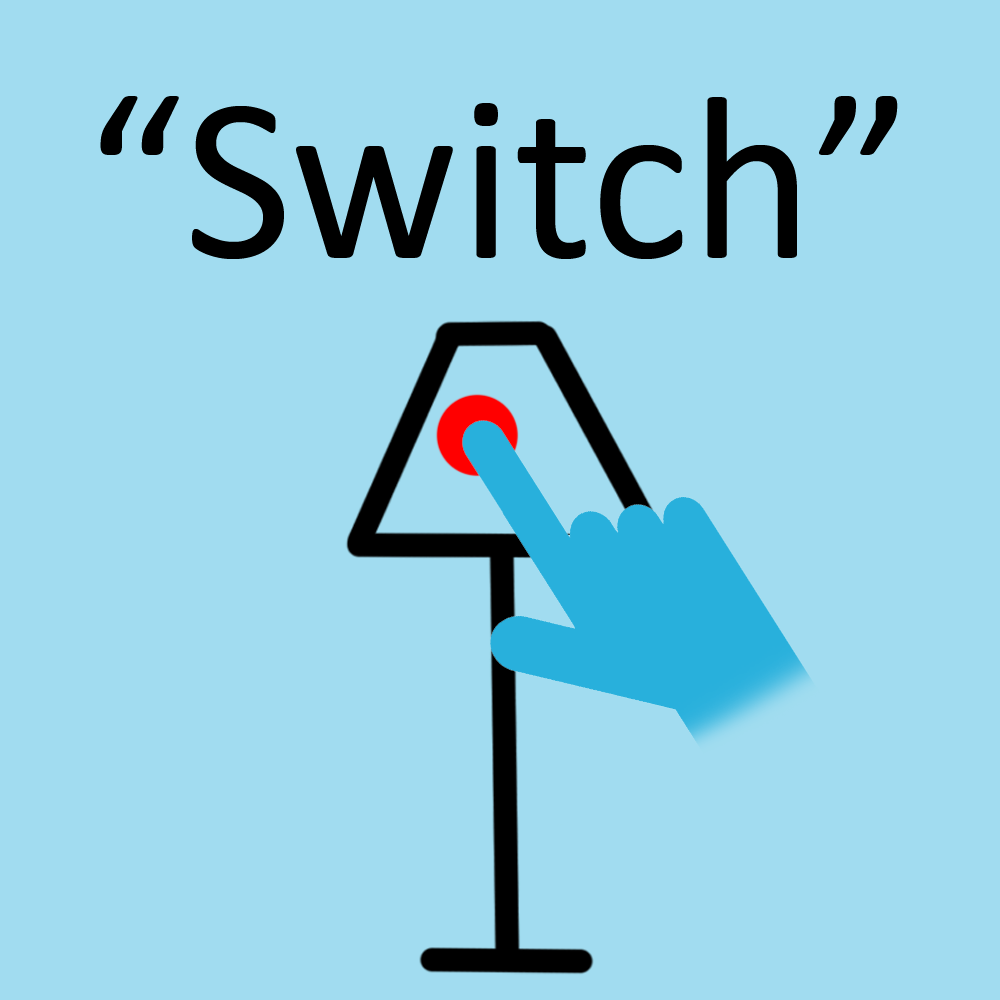
<style>
.page{position:relative;width:1000px;height:1000px;background:#a1dcf0}
.page>*{position:absolute;margin:0}
.t1{font:236.3px "Calibri";color:#000000}
</style>
<div class="page">
<p class="t1" style="left:100px;top:96px;width:798px;height:163px">“Switch”</p>
</div>
